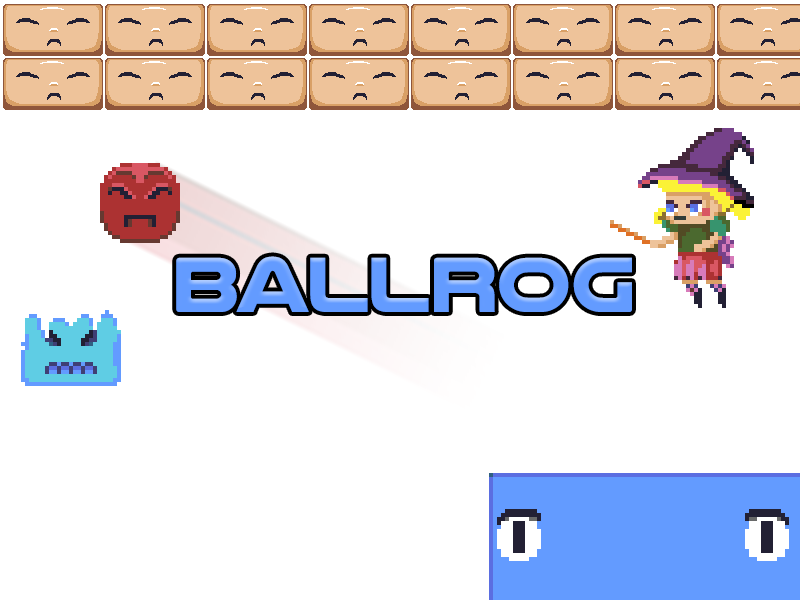
<style>
.page{position:relative;width:800px;height:600px;background:#ffffff}
.page>*{position:absolute;margin:0}
.t1{font:80px "NulshockRg-Bold";color:#639bff}
</style>
<div class="page">
<p class="t1" style="left:176px;top:256px;width:456px;height:56px">Ballrog</p>
</div>
